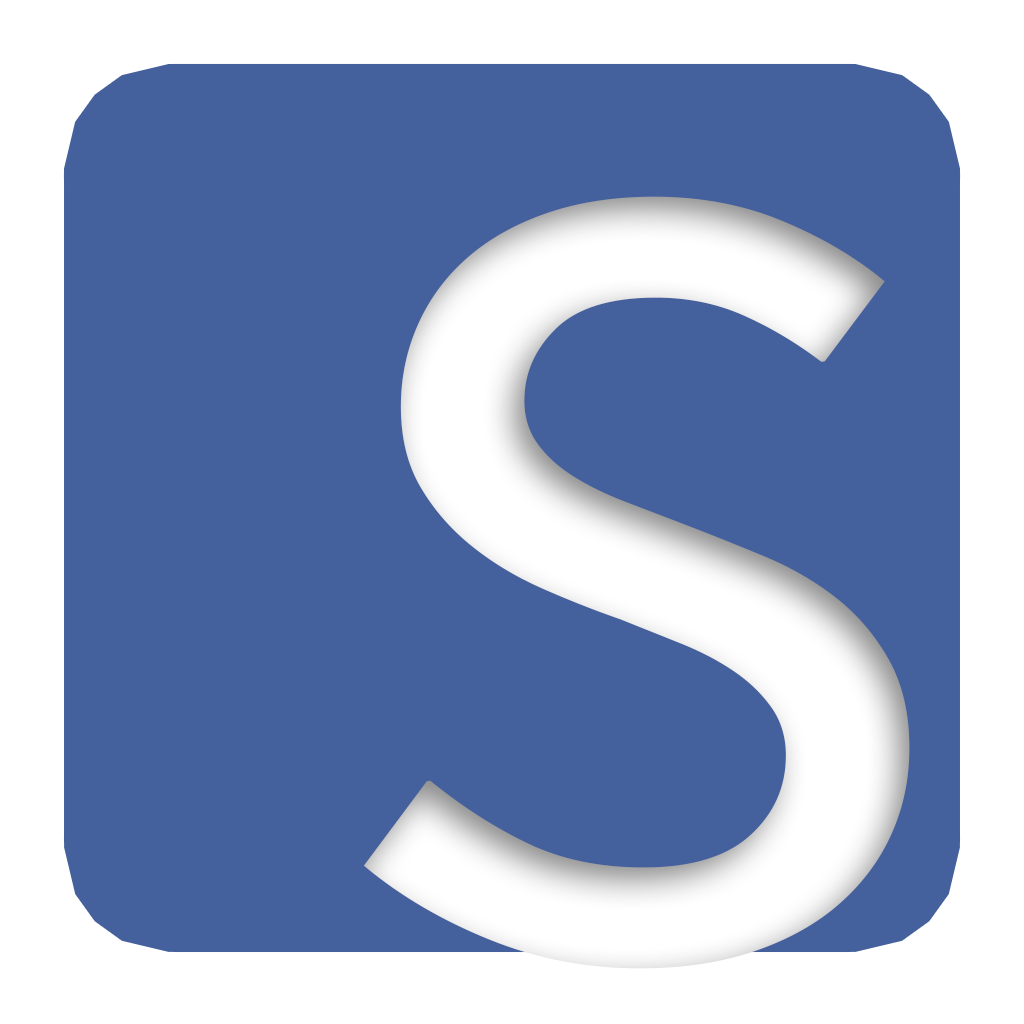
<style>
.page{position:relative;width:1024px;height:1024px;background:#45619d}
.page>*{position:absolute;margin:0}
.t1{font:1504.4px "SourceSansPro-Regular";color:#ffffff;font-weight:bold}
</style>
<div class="page">
<p class="t1" style="left:363px;top:196px;width:547px;height:773px">s</p>
</div>
